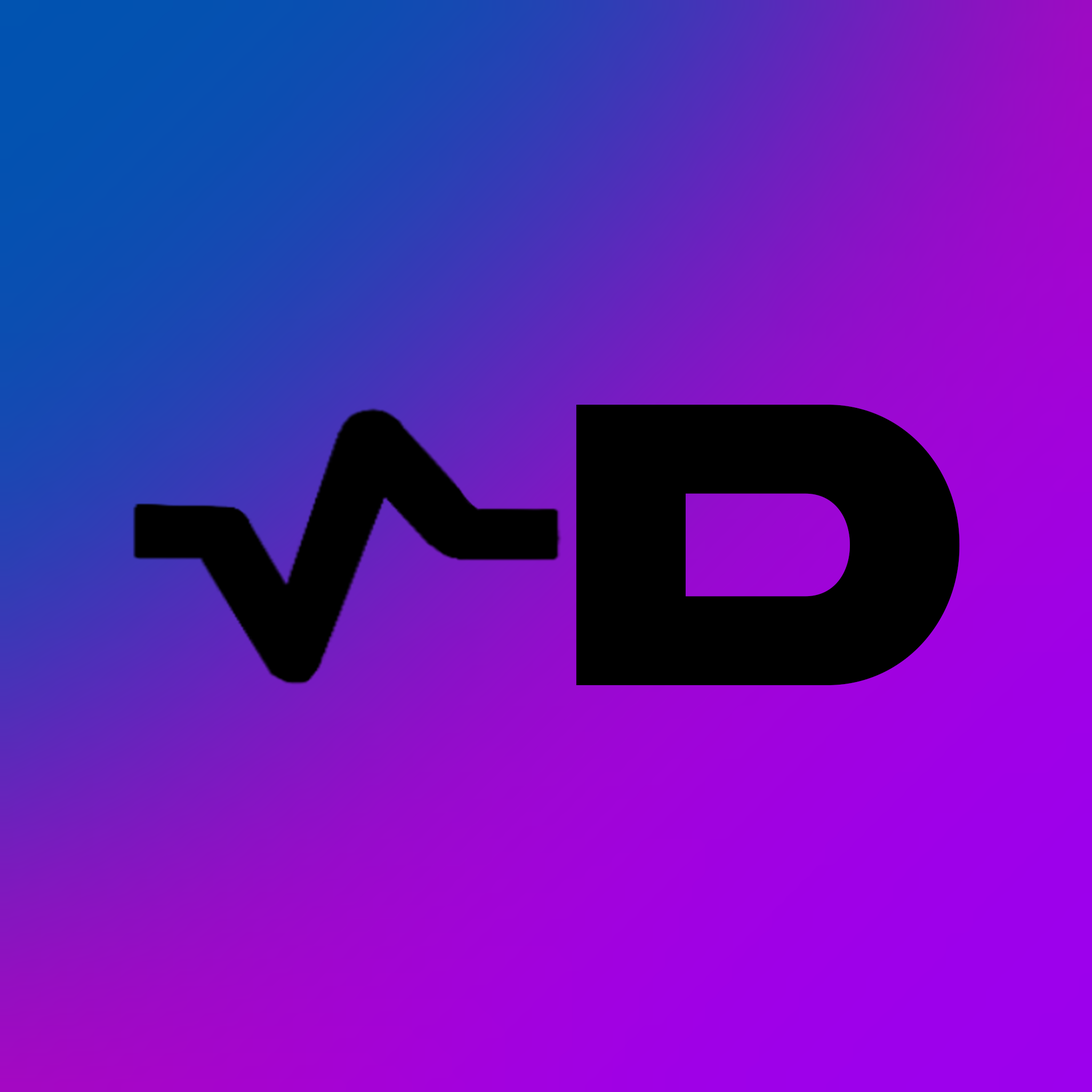
<style>
.page{position:relative;width:1092px;height:1092px}
.page>*{position:absolute;margin:0}
.t1{font:427.4px "AkiraExpanded-SuperBold";color:#000000}
</style>
<div class="page">
<p class="t1" style="left:576px;top:405px;width:384px;height:280px">D</p>
</div>
